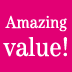
<style>
.page{position:relative;width:72px;height:72px;background:#e20074}
.page>*{position:absolute;margin:0}
.t1{font:18px/28px "Tele-Antiqua";color:#ffffff}
.t2{font:28px/28px "Tele-Antiqua";color:#ffffff}
</style>
<div class="page">
<p class="t1" style="left:3px;top:15px;width:64px;height:42px;text-align:center">Amazing<br><span class="t2">value!</span></p>
</div>
